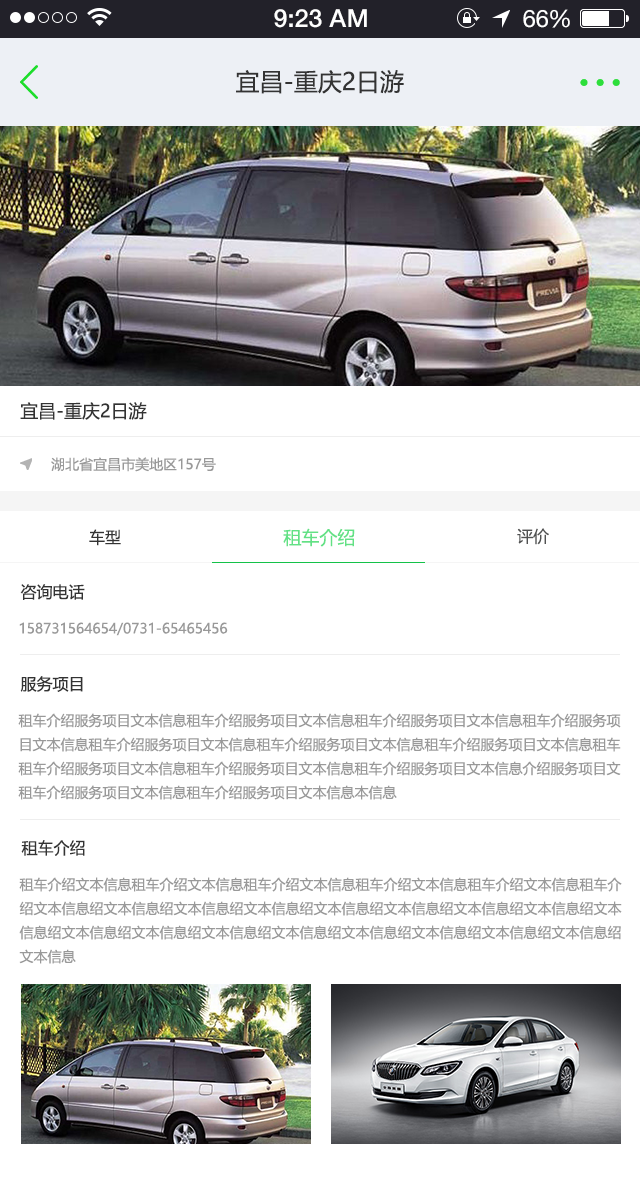
<style>
.page{position:relative;width:640px;height:1190px;background:#ffffff}
.page>*{position:absolute;margin:0}
.t1{font:25px "HelveticaNeue-Medium";color:#ffffff}
.t2{font:24px "HelveticaNeue";color:#ffffff}
.t3{font:24px "HelveticaNeue";letter-spacing:-0.02em;color:#ffffff}
.t4{font:24px "MicrosoftYaHei";color:#333333}
.t5{font:18px "MicrosoftYaHei";color:#333333}
.t6{font:14px "MicrosoftYaHei";color:#999999}
.t7{font:16px "MicrosoftYaHei";color:#333333}
.t8{font:18px "MicrosoftYaHei";color:#61e186}
.t9{font:16px "MicrosoftYaHei";color:#515252}
.t10{font:14px/24px "MicrosoftYaHei";color:#999999}
</style>
<div class="page">
<p class="t1" style="left:274px;top:9px;width:93px;height:19px">9:23 AM</p>
<p class="t2" style="left:523px;top:9px;width:47px;height:19px">6<span class="t3">6</span>%</p>
<p class="t4" style="left:236px;top:70px;width:168px;height:24px">宜昌-重庆2日游</p>
<p class="t5" style="left:20px;top:402px;width:127px;height:18px">宜昌-重庆2日游</p>
<p class="t6" style="left:51px;top:457px;width:165px;height:15px">湖北省宜昌市美地区157号</p>
<p class="t7" style="left:89px;top:529px;width:32px;height:17px">车型</p>
<p class="t8" style="left:283px;top:528px;width:72px;height:19px">租车介绍</p>
<p class="t9" style="left:517px;top:528px;width:32px;height:17px">评价</p>
<p class="t7" style="left:20px;top:584px;width:65px;height:16px">咨询电话</p>
<p class="t6" style="left:19px;top:622px;width:209px;height:14px">158731564654/0731-65465456</p>
<p class="t7" style="left:20px;top:676px;width:63px;height:16px">服务项目</p>
<p class="t10" style="left:18px;top:713px;width:603px;height:87px">租车介绍服务项目文本信息租车介绍服务项目文本信息租车介绍服务项目文本信息租车介绍服务项<br>目文本信息租车介绍服务项目文本信息租车介绍服务项目文本信息租车介绍服务项目文本信息租车<br>租车介绍服务项目文本信息租车介绍服务项目文本信息租车介绍服务项目文本信息介绍服务项目文<br>租车介绍服务项目文本信息租车介绍服务项目文本信息本信息</p>
<p class="t7" style="left:21px;top:840px;width:64px;height:16px">租车介绍</p>
<p class="t10" style="left:19px;top:877px;width:603px;height:87px">租车介绍文本信息租车介绍文本信息租车介绍文本信息租车介绍文本信息租车介绍文本信息租车介<br>绍文本信息绍文本信息绍文本信息绍文本信息绍文本信息绍文本信息绍文本信息绍文本信息绍文本<br>信息绍文本信息绍文本信息绍文本信息绍文本信息绍文本信息绍文本信息绍文本信息绍文本信息绍<br>文本信息</p>
</div>
